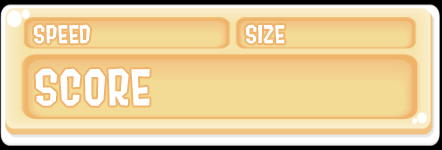
<style>
.page{position:relative;width:442px;height:150px}
.page>*{position:absolute;margin:0}
.t1{font:25px "Splat2K";letter-spacing:0.01em;color:#ffffff}
.t2{font:50px "Splat2K";letter-spacing:0.01em;color:#ffffff}
</style>
<div class="page">
<p class="t1" style="left:33px;top:24px;width:57px;height:20px">SPEED</p>
<p class="t1" style="left:245px;top:24px;width:40px;height:20px">SIZE</p>
<p class="t2" style="left:35px;top:68px;width:115px;height:38px">SCORE</p>
</div>
